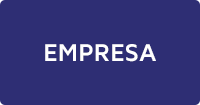
<style>
.page{position:relative;width:200px;height:105px;background:#2e2e74}
.page>*{position:absolute;margin:0}
.t1{font:25px "MavenProBold";color:#ffffff}
</style>
<div class="page">
<p class="t1" style="left:45px;top:44px;width:111px;height:18px">EMPRESA</p>
</div>
